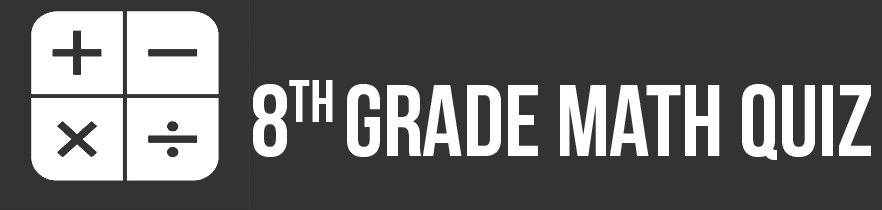
<style>
.page{position:relative;width:882px;height:210px;background:#333333}
.page>*{position:absolute;margin:0}
.t1{font:101px "BebasNeue";color:#ffffff;text-transform:uppercase}
</style>
<div class="page">
<p class="t1" style="left:253px;top:80px;width:618px;height:80px">8TH GRADE MATH QUIZ</p>
</div>
